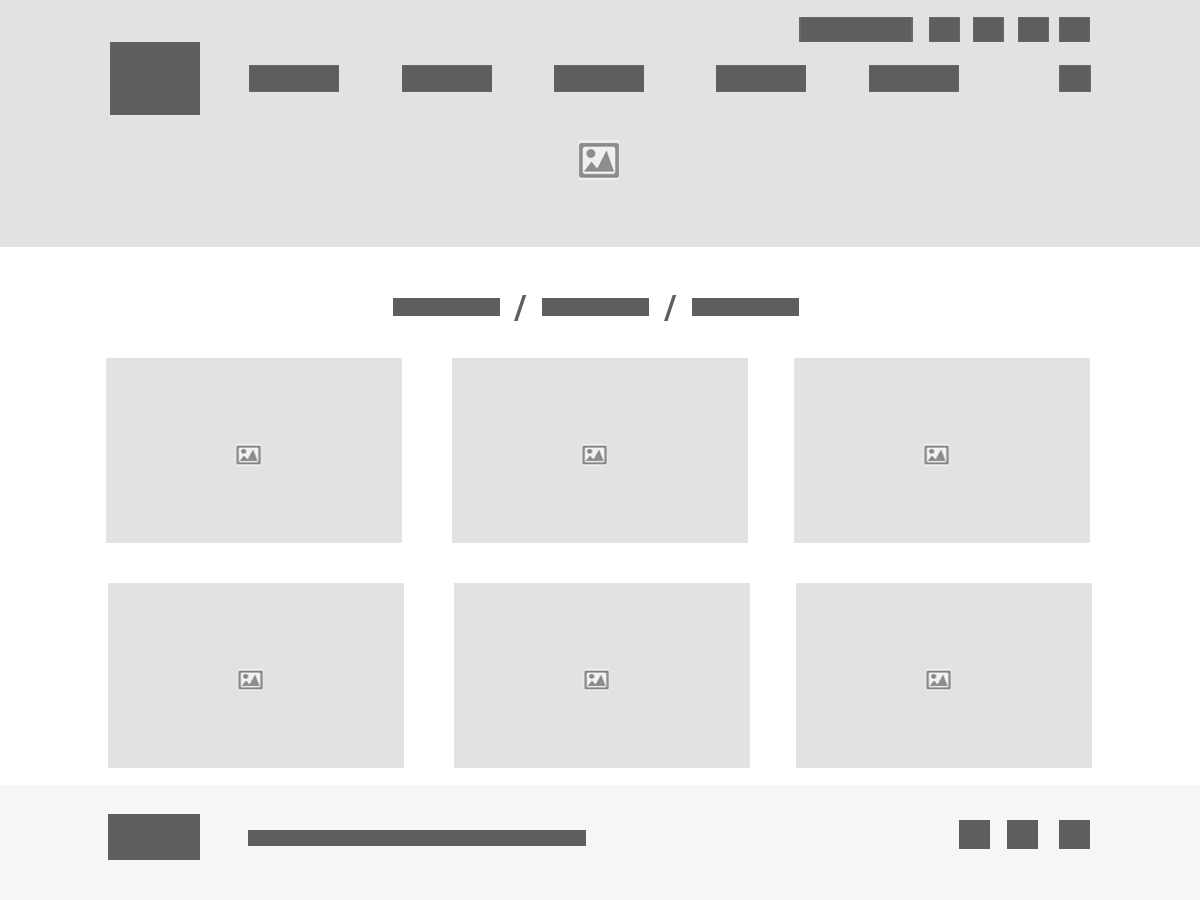
<style>
.page{position:relative;width:1200px;height:900px;background:#e2e2e2}
.page>*{position:absolute;margin:0}
.t1{font:29.9px "DINOT-Bold";color:#5e5e5e}
</style>
<div class="page">
<p class="t1" style="left:514px;top:295px;width:13px;height:26px">/</p>
<p class="t1" style="left:664px;top:295px;width:13px;height:26px">/</p>
</div>
